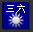
<style>
.page{position:relative;width:33px;height:32px;background:#000090}
.page>*{position:absolute;margin:0}
.t1{font:10.4px "SimSun";color:#ffffff}
</style>
<div class="page">
<p class="t1" style="left:6px;top:4px;width:19px;height:9px">三六</p>
</div>
